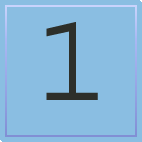
<style>
.page{position:relative;width:142px;height:142px;background:#8abee2}
.page>*{position:absolute;margin:0}
.t1{font:132.7px "Courier";letter-spacing:-0.119em;color:#2d2f2a;scale:0.96 1}
</style>
<div class="page">
<p class="t1" style="left:46px;top:22px;width:52px;height:78px">1</p>
</div>
